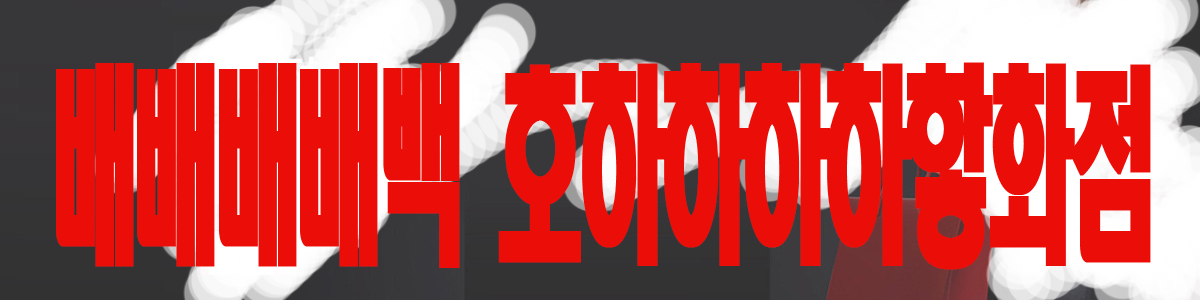
<style>
.page{position:relative;width:1200px;height:300px;background:#eb0d07}
.page>*{position:absolute;margin:0}
.t1{font:209.1px "HeadlineR-HM";letter-spacing:-0.12em;color:#eb0d07;font-weight:bold;scale:0.43 1}
</style>
<div class="page">
<p class="t1" style="left:56px;top:62px;width:1095px;height:208px">배배배배백 호하하하하핳화점</p>
</div>
